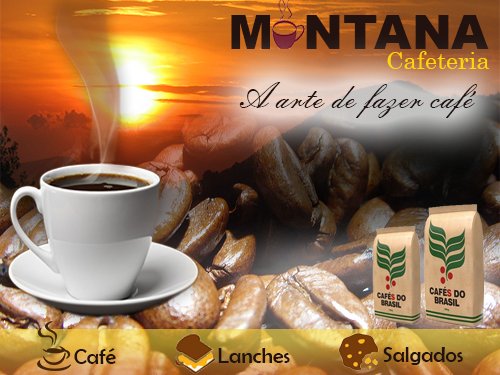
<style>
.page{position:relative;width:500px;height:375px}
.page>*{position:absolute;margin:0}
.t1{font:48px "Arial-Black";color:#21120f}
.t2{font:24px "Century";color:#ffd602}
.t3{font:36px "EmbassyBT-Regular";color:#21120f}
.t4{font:22px "BerlinSansFB-Reg";color:#21120f}
</style>
<div class="page">
<p class="t1" style="left:231px;top:15px;width:39px;height:34px">M</p>
<p class="t1" style="left:306px;top:15px;width:183px;height:34px">NTANA</p>
<p class="t2" style="left:387px;top:51px;width:103px;height:18px">Cafeteria</p>
<p class="t3" style="left:239px;top:82px;width:239px;height:36px">A arte de fazer café</p>
<p class="t4" style="left:74px;top:348px;width:42px;height:16px">Café</p>
<p class="t4" style="left:218px;top:348px;width:72px;height:15px">Lanches</p>
<p class="t4" style="left:383px;top:347px;width:80px;height:18px">Salgados</p>
</div>
